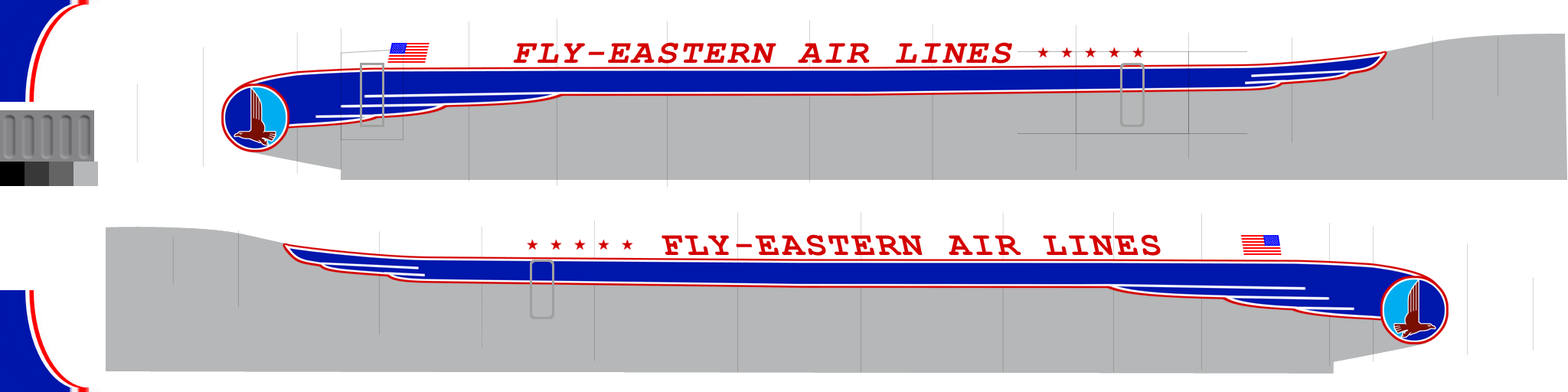
<style>
.page{position:relative;width:1568px;height:392px;background:#ffffff}
.page>*{position:absolute;margin:0}
.t1{font:33.8px "CourierNewPS-BoldMT";letter-spacing:0.05em;color:#d40000;scale:1.09 1}
</style>
<div class="page">
<p class="t1" style="left:513px;top:42px;width:499px;height:22px">FLY-EASTERN AIR LINES</p>
<p class="t1" style="left:662px;top:234px;width:499px;height:22px">FLY-EASTERN AIR LINES</p>
</div>
